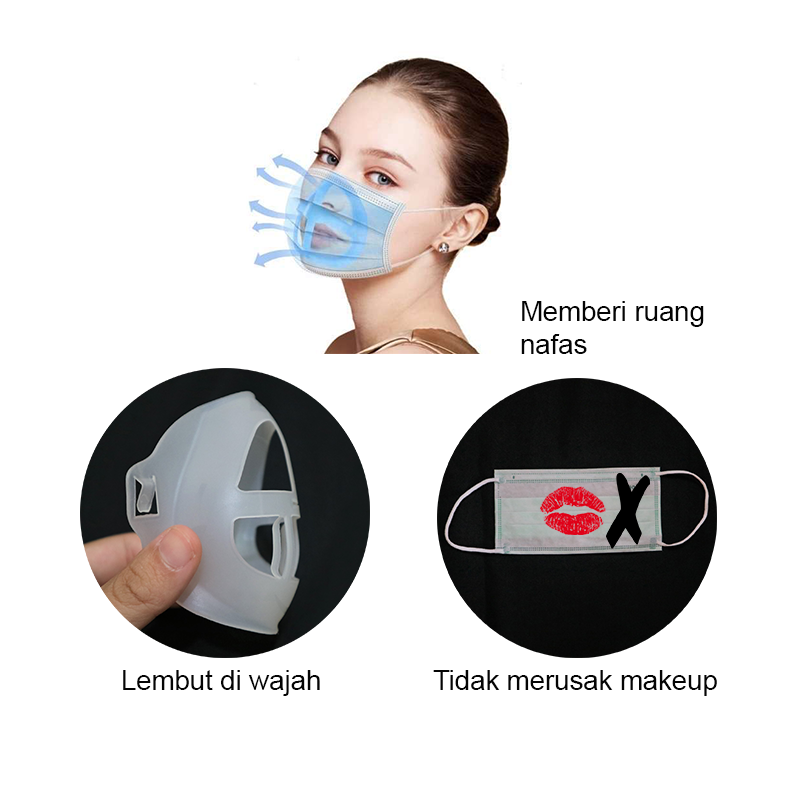
<style>
.page{position:relative;width:800px;height:800px;background:#ffffff}
.page>*{position:absolute;margin:0}
.t1{font:27.5px "ArialMT";color:#040404}
</style>
<div class="page">
<p class="t1" style="left:521px;top:301px;width:183px;height:53px">Memberi ruang <br>nafas</p>
<p class="t1" style="left:123px;top:670px;width:197px;height:26px">Lembut di wajah</p>
<p class="t1" style="left:433px;top:670px;width:284px;height:26px">Tidak merusak makeup</p>
</div>
